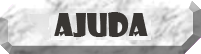
<style>
.page{position:relative;width:201px;height:54px}
.page>*{position:absolute;margin:0}
.t1{font:30px "ShowcardGothic-Reg";color:#393633}
.t2{font:14px "ShowcardGothic-Reg";color:#1a2732}
</style>
<div class="page">
<p class="t1" style="left:54px;top:12px;width:94px;height:25px"><span class="t2"><br></span>ajuda</p>
</div>
